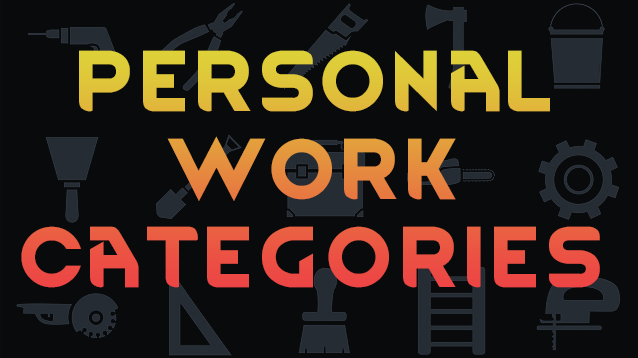
<style>
.page{position:relative;width:638px;height:358px;background:#090a0c}
.page>*{position:absolute;margin:0}
.t1{font:73.3px "RimWordFont"}
.t2{font:73.3px "RimWordFont";letter-spacing:0.06em}
.t3{font:73.3px "RimWordFont";letter-spacing:0.055em}
.t4{font:73.3px "RimWordFont";letter-spacing:0.08em}
</style>
<div class="page">
<p class="t1" style="left:21px;top:50px;width:579px;height:238px;text-align:center">pers<span class="t2">o</span>nal w<span class="t3">o</span>rk cate<span class="t4">go</span>ries</p>
</div>
